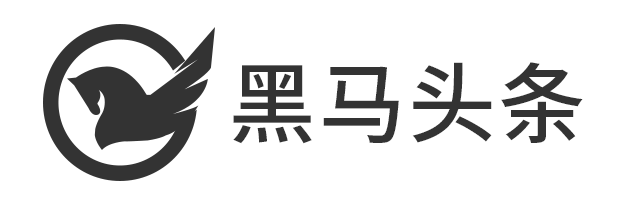
<style>
.page{position:relative;width:625px;height:200px;background:#ffffff}
.page>*{position:absolute;margin:0}
.t1{font:88px "SourceHanSansCN-Medium";letter-spacing:0.025em;color:#333333}
</style>
<div class="page">
<p class="t1" style="left:233px;top:62px;width:350px;height:82px">黑马头条</p>
</div>
